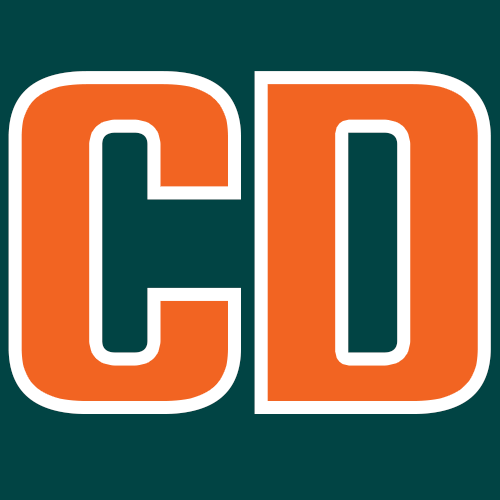
<style>
.page{position:relative;width:500px;height:500px;background:#014444}
.page>*{position:absolute;margin:0}
.t1{font:534.3px "Teko-Bold";letter-spacing:-0.05em;color:#f26422}
</style>
<div class="page">
<p class="t1" style="left:8px;top:71px;width:483px;height:343px">CD</p>
</div>
